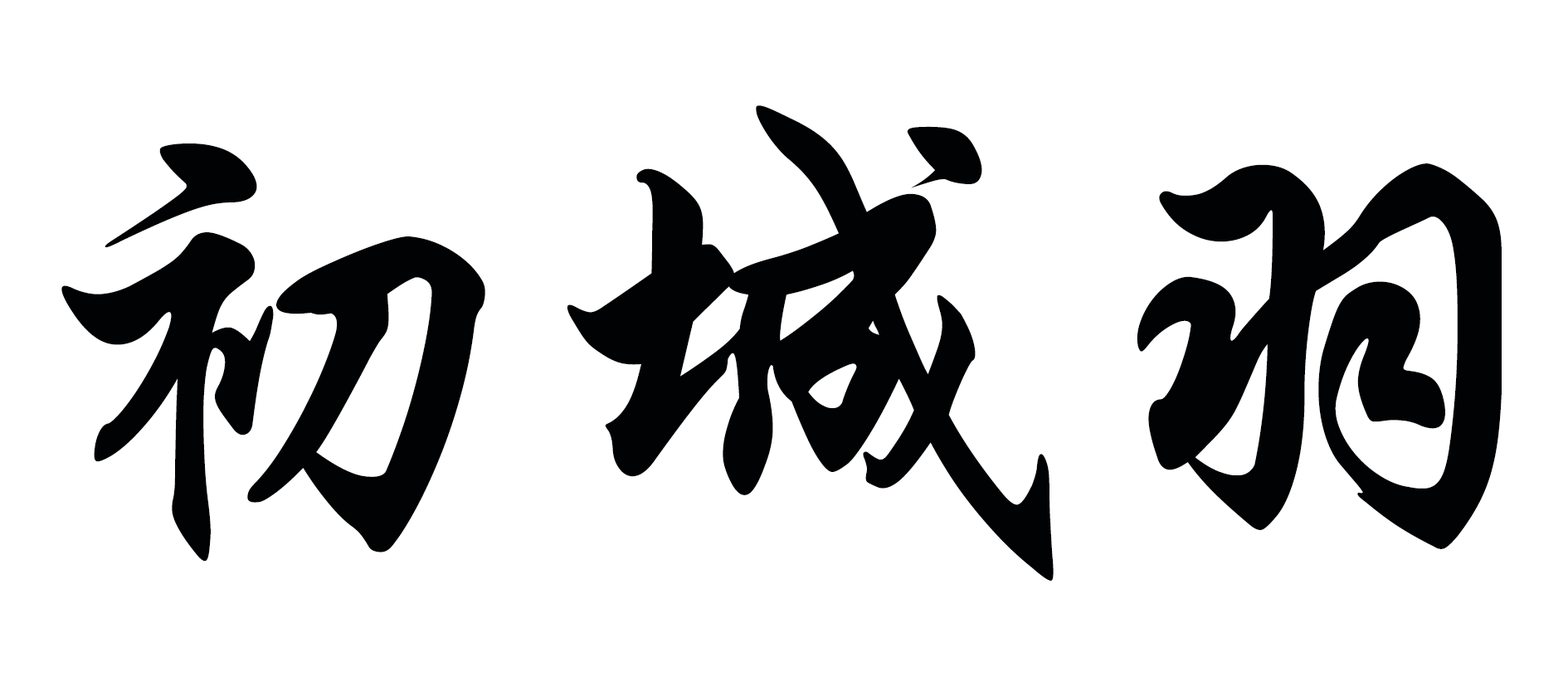
<style>
.page{position:relative;width:1568px;height:686px;background:#ffffff}
.page>*{position:absolute;margin:0}
.t1{font:518.5px "STXingkaiTC-Bold";color:#010203}
</style>
<div class="page">
<p class="t1" style="left:61px;top:105px;width:1441px;height:476px">初城羽</p>
</div>
